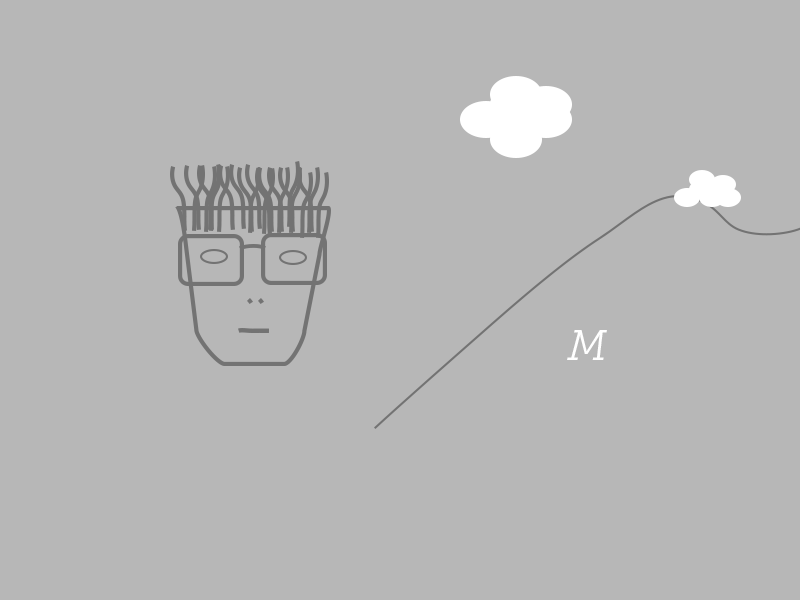
<style>
.page{position:relative;width:800px;height:600px;background:#b7b7b7}
.page>*{position:absolute;margin:0}
.t1{font:41.7px "MuseoSlab-300Italic";color:#ffffff}
</style>
<div class="page">
<p class="t1" style="left:567px;top:330px;width:40px;height:30px">M</p>
</div>
